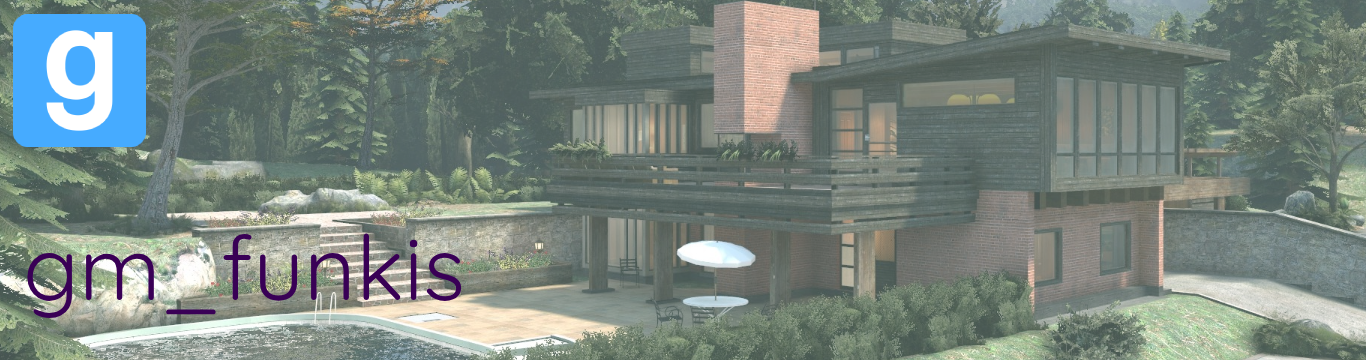
<style>
.page{position:relative;width:1366px;height:360px}
.page>*{position:absolute;margin:0}
.t1{font:89.7px "Quicksand-Regular";color:#390056}
</style>
<div class="page">
<p class="t1" style="left:27px;top:233px;width:435px;height:85px">gm_funkis</p>
</div>
